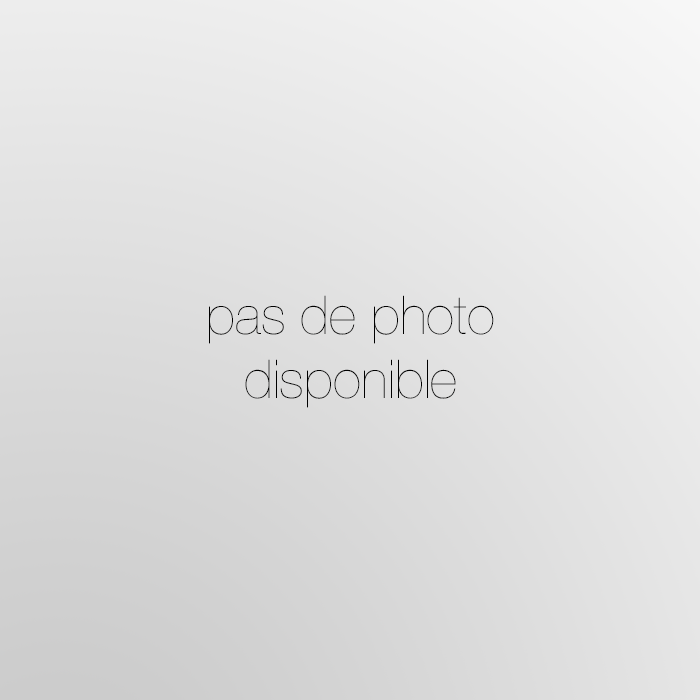
<style>
.page{position:relative;width:700px;height:700px}
.page>*{position:absolute;margin:0}
.t1{font:53.6px "HelveticaNeue-UltraLight";color:#000000}
</style>
<div class="page">
<p class="t1" style="left:209px;top:295px;width:285px;height:113px;text-align:center">pas de photo<br>disponible</p>
</div>
